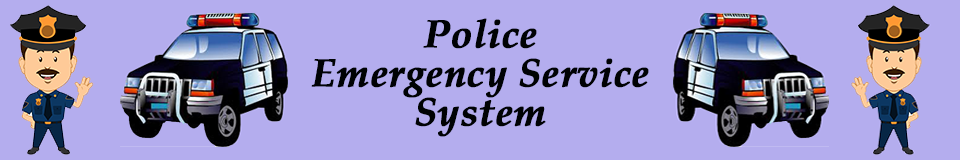
<style>
.page{position:relative;width:960px;height:160px;background:#b4adee}
.page>*{position:absolute;margin:0}
.t1{font:39.1px/39.1px "PalatinoLinotype-BoldItalic";color:#000204;font-weight:bold}
</style>
<div class="page">
<p class="t1" style="left:311px;top:18px;width:338px;height:119px;text-align:center">Police <br>Emergency Service <br>System</p>
</div>
